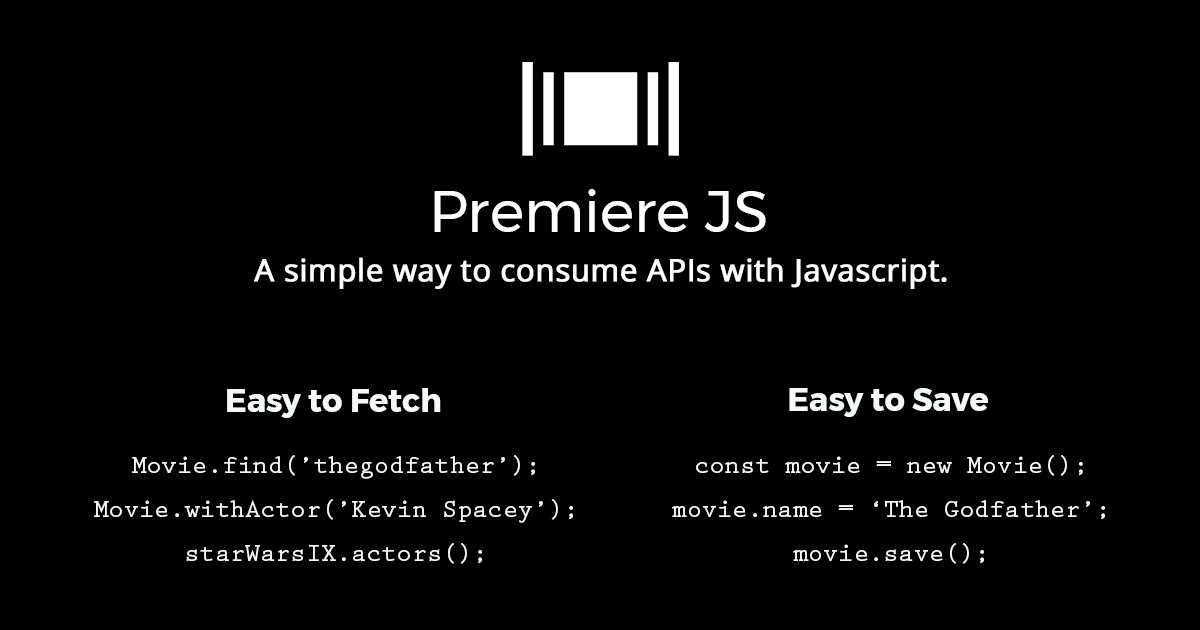
<style>
.page{position:relative;width:1200px;height:630px;background:#000000}
.page>*{position:absolute;margin:0}
.t1{font:57.8px "Montserrat-Regular";color:#ffffff}
.t2{font:30.8px "OpenSans-Regular";color:#ffffff;font-weight:bold}
.t3{font:32px "Montserrat-Bold";color:#f5f9fa}
.t4{font:31.9px "Montserrat-Bold";color:#f5f9fa}
.t5{font:25.3px/44.2px "PrestigeEliteStd-Bd";color:#f5f9fa}
.t6{font:25.2px/44.2px "PrestigeEliteStd-Bd";color:#f5f9fa}
</style>
<div class="page">
<p class="t1" style="left:434px;top:189px;width:332px;height:43px">Premiere JS</p>
<p class="t2" style="left:254px;top:257px;width:693px;height:32px">A simple way to consume APIs with Javascript.</p>
<p class="t3" style="left:227px;top:388px;width:214px;height:30px">Easy to Fetch</p>
<p class="t4" style="left:789px;top:388px;width:199px;height:29px">Easy to Save</p>
<p class="t5" style="left:94px;top:455px;width:479px;height:109px;text-align:center">Movie.find(’thegodfather’);<br>Movie.withActor(’Kevin Spacey’);<br>starWarsIX.actors();</p>
<p class="t6" style="left:672px;top:455px;width:433px;height:109px;text-align:center">const movie = new Movie();<br>movie.name = ‘The Godfather’;<br>movie.save();</p>
</div>
